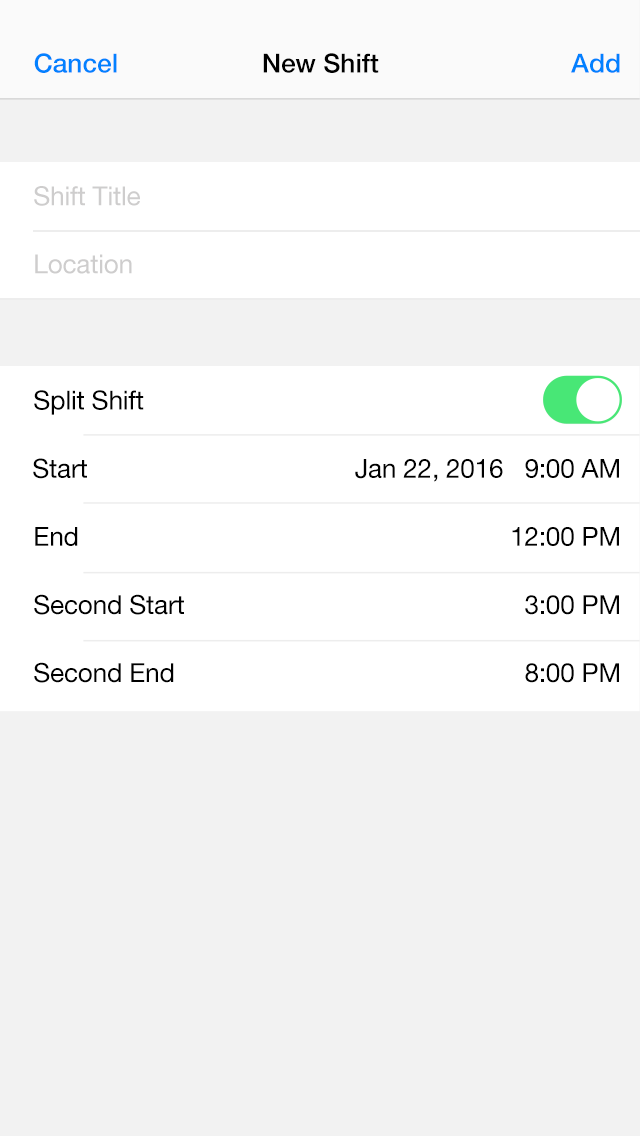
<style>
.page{position:relative;width:640px;height:1136px;background:#f2f2f2}
.page>*{position:absolute;margin:0}
.t1{font:26.3px "HelveticaNeue-Medium";color:#0281ff}
.t2{font:26.3px "HelveticaNeue-Medium";color:#000000}
.t3{font:26.3px/68.1px "HelveticaNeue";letter-spacing:-0.01em;color:#cecdcd}
.t4{font:26.3px/68.1px "HelveticaNeue";letter-spacing:-0.01em;color:#000000}
</style>
<div class="page">
<p class="t1" style="left:34px;top:53px;width:83px;height:20px">Cancel</p>
<p class="t2" style="left:263px;top:53px;width:116px;height:20px">New Shift</p>
<p class="t1" style="left:571px;top:53px;width:49px;height:20px">Add</p>
<p class="t3" style="left:34px;top:186px;width:106px;height:88px">Shift Title<br>Location</p>
<p class="t4" style="left:33px;top:390px;width:151px;height:293px">Split Shift<br>Start<br>End<br>Second Start<br>Second End</p>
<p class="t4" style="left:355px;top:459px;width:264px;height:224px;text-align:right">Jan 22, 2016   9:00 AM<br>12:00 PM<br>3:00 PM<br>8:00 PM<br><br>Off<br>On<br><br>All Mail</p>
</div>
